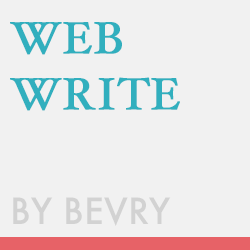
<style>
.page{position:relative;width:250px;height:250px;background:#f1f1f1}
.page>*{position:absolute;margin:0}
.t1{font:45px/56.2px "HoeflerText-Regular";color:#31afbe;text-transform:uppercase;font-weight:bold}
.t2{font:35px "Futura-Medium";color:#d2d2d2;text-transform:uppercase}
</style>
<div class="page">
<p class="t1" style="left:10px;top:22px;width:170px;height:89px">Web<br>write</p>
<p class="t2" style="left:13px;top:197px;width:158px;height:29px">by bevry</p>
</div>
